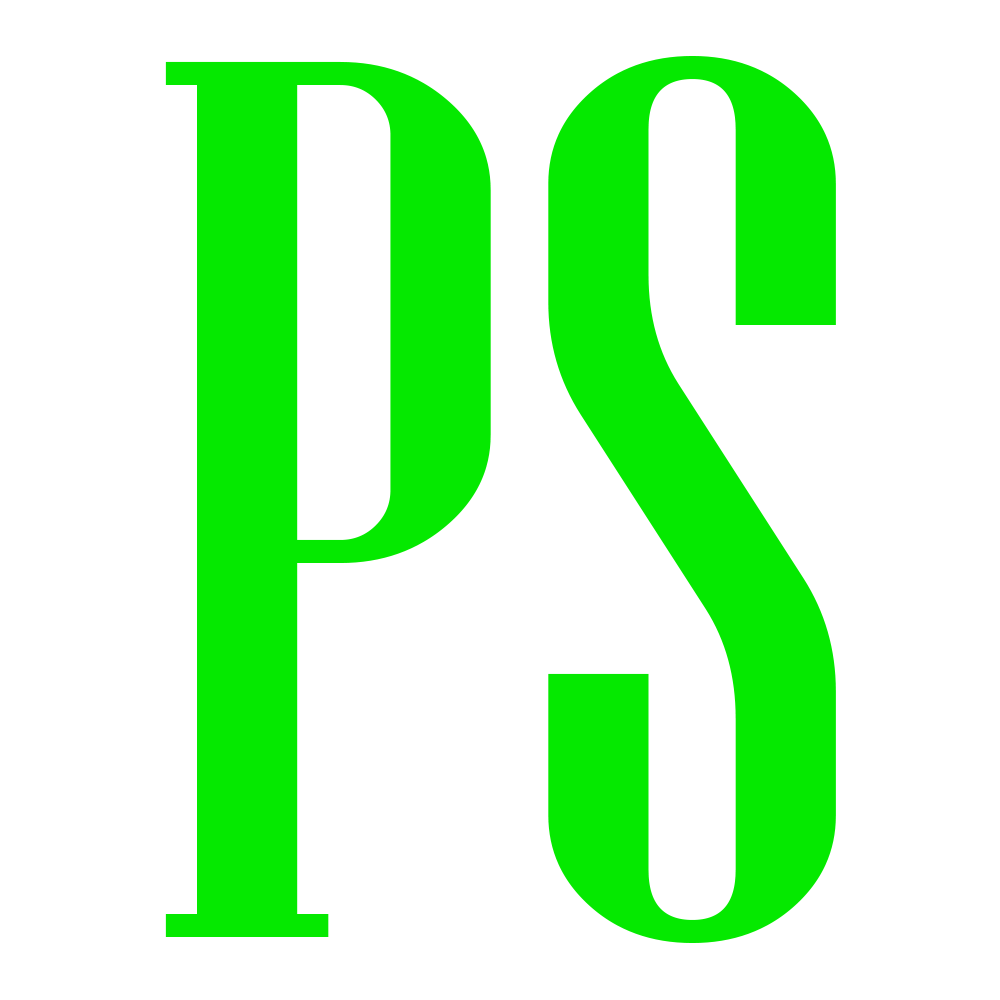
<style>
.page{position:relative;width:1000px;height:1000px;background:#ffffff}
.page>*{position:absolute;margin:0}
.t1{font:1250px "NiagaraSolid-Reg";color:#05e900}
</style>
<div class="page">
<p class="t1" style="left:165px;top:55px;width:671px;height:888px">PS</p>
</div>
